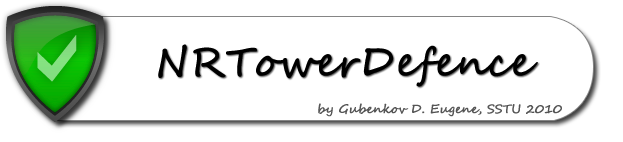
<style>
.page{position:relative;width:623px;height:142px;background:#ffffff}
.page>*{position:absolute;margin:0}
.t1{font:40px "SegoeScript";color:#000000;font-weight:bold}
.t2{font:12px "SegoeScript";color:#555555;font-weight:bold}
</style>
<div class="page">
<p class="t1" style="left:158px;top:44px;width:380px;height:43px">NRTowerDefence</p>
<p class="t2" style="left:318px;top:103px;width:244px;height:14px">by Gubenkov D. Eugene, SSTU 2010</p>
</div>
